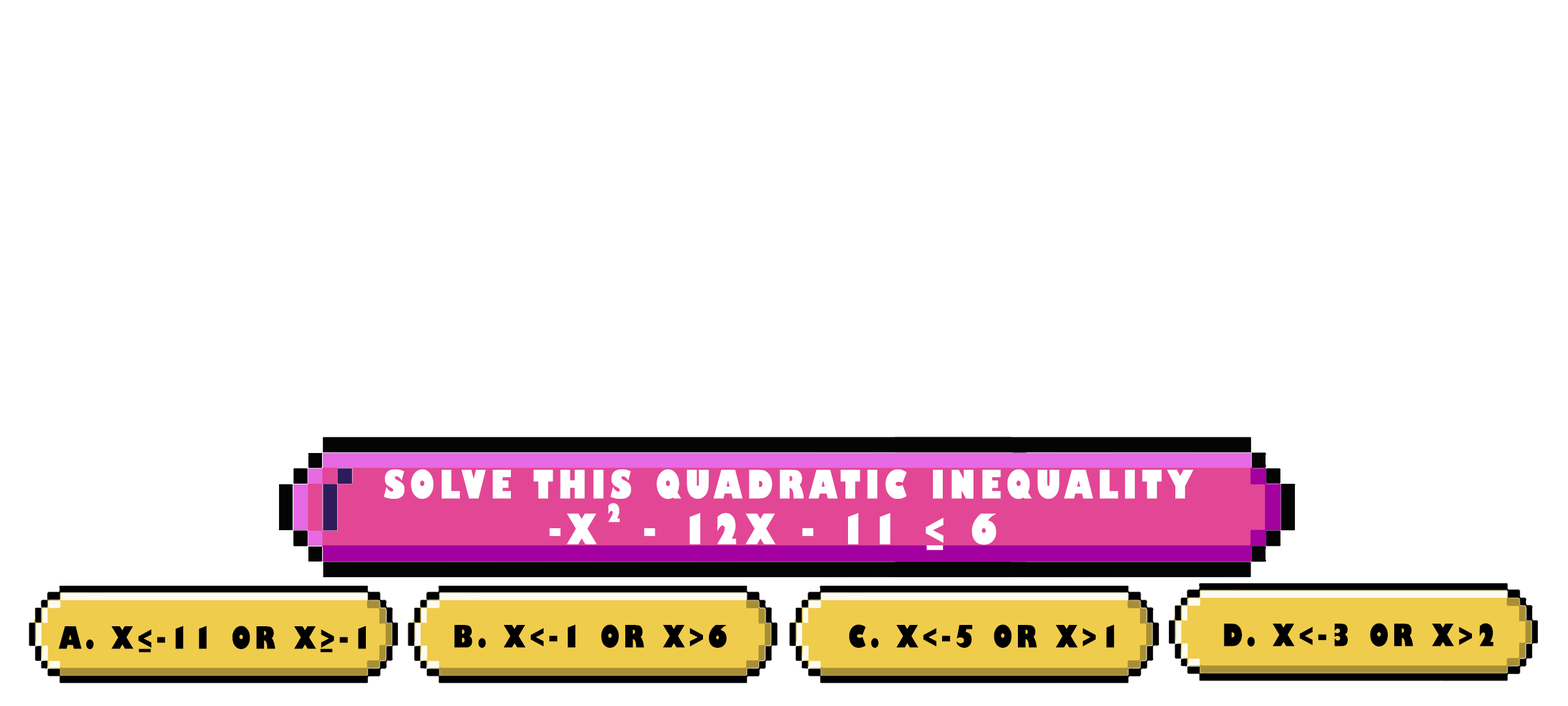
<style>
.page{position:relative;width:1568px;height:706px;background:#ffffff}
.page>*{position:absolute;margin:0}
.t1{font:38.1px "GillSans-UltraBoldCondensed";letter-spacing:0.115em;color:#ffffff;text-transform:uppercase;scale:1.12 1}
.t2{font:24.5px "GillSans-UltraBoldCondensed";letter-spacing:0.115em;color:#ffffff;text-transform:uppercase;scale:1.12 1}
.t3{font:40.8px "GillSans-UltraBoldCondensed";letter-spacing:0.115em;color:#ffffff;text-transform:uppercase;scale:1.12 1}
.t4{font:29.9px "GillSans-UltraBoldCondensed";letter-spacing:0.115em;color:#000000;text-transform:uppercase;scale:1.12 1}
</style>
<div class="page">
<p class="t1" style="left:384px;top:469px;width:810px;height:30px">solve this quadratic inequality</p>
<p class="t2" style="left:608px;top:502px;width:12px;height:20px">2</p>
<p class="t3" style="left:549px;top:512px;width:447px;height:33px">-x  - 12x - 11 &lt; 6</p>
<p class="t3" style="left:926px;top:545px;width:17px;height:5px">_</p>
<p class="t4" style="left:59px;top:625px;width:307px;height:24px">a. x&lt;-11 or x&gt;-1</p>
<p class="t4" style="left:454px;top:624px;width:273px;height:23px">b. x&lt;-1 or x&gt;6</p>
<p class="t4" style="left:849px;top:624px;width:266px;height:23px">c. x&lt;-5 or x&gt;1</p>
<p class="t4" style="left:1224px;top:623px;width:270px;height:23px">d. x&lt;-3 or x&gt;2</p>
<p class="t4" style="left:139px;top:648px;width:12px;height:4px">_</p>
<p class="t4" style="left:320px;top:648px;width:13px;height:4px">_</p>
</div>
